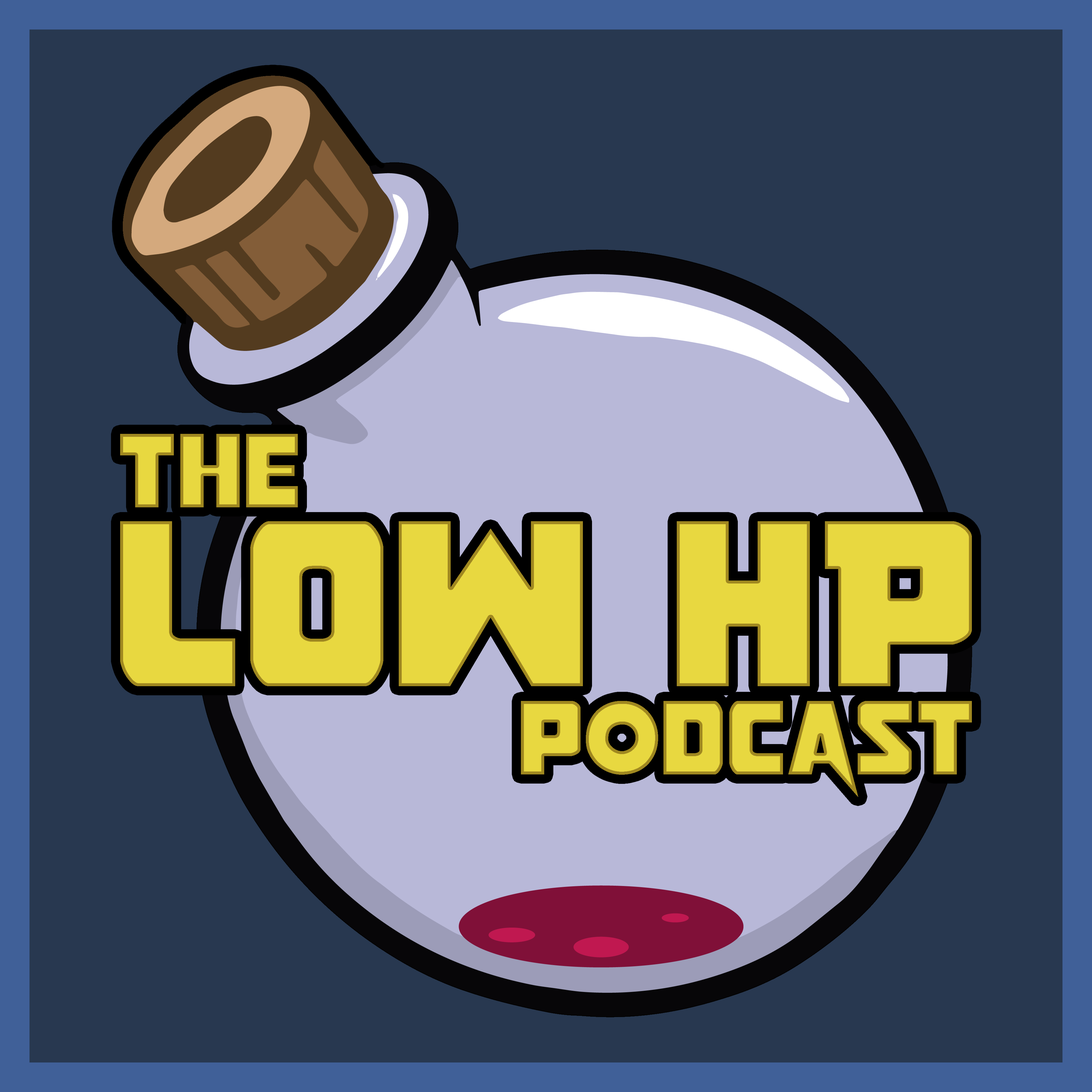
<style>
.page{position:relative;width:1092px;height:1092px;background:#283850}
.page>*{position:absolute;margin:0}
.t1{font:123px "Pistoleer";color:#e8d840}
.t2{font:276.7px "Pistoleer";color:#e8d840}
</style>
<div class="page">
<p class="t1" style="left:120px;top:434px;width:178px;height:73px">the</p>
<p class="t2" style="left:120px;top:521px;width:852px;height:165px">LOW HP</p>
<p class="t1" style="left:521px;top:701px;width:451px;height:96px">podcast</p>
</div>
